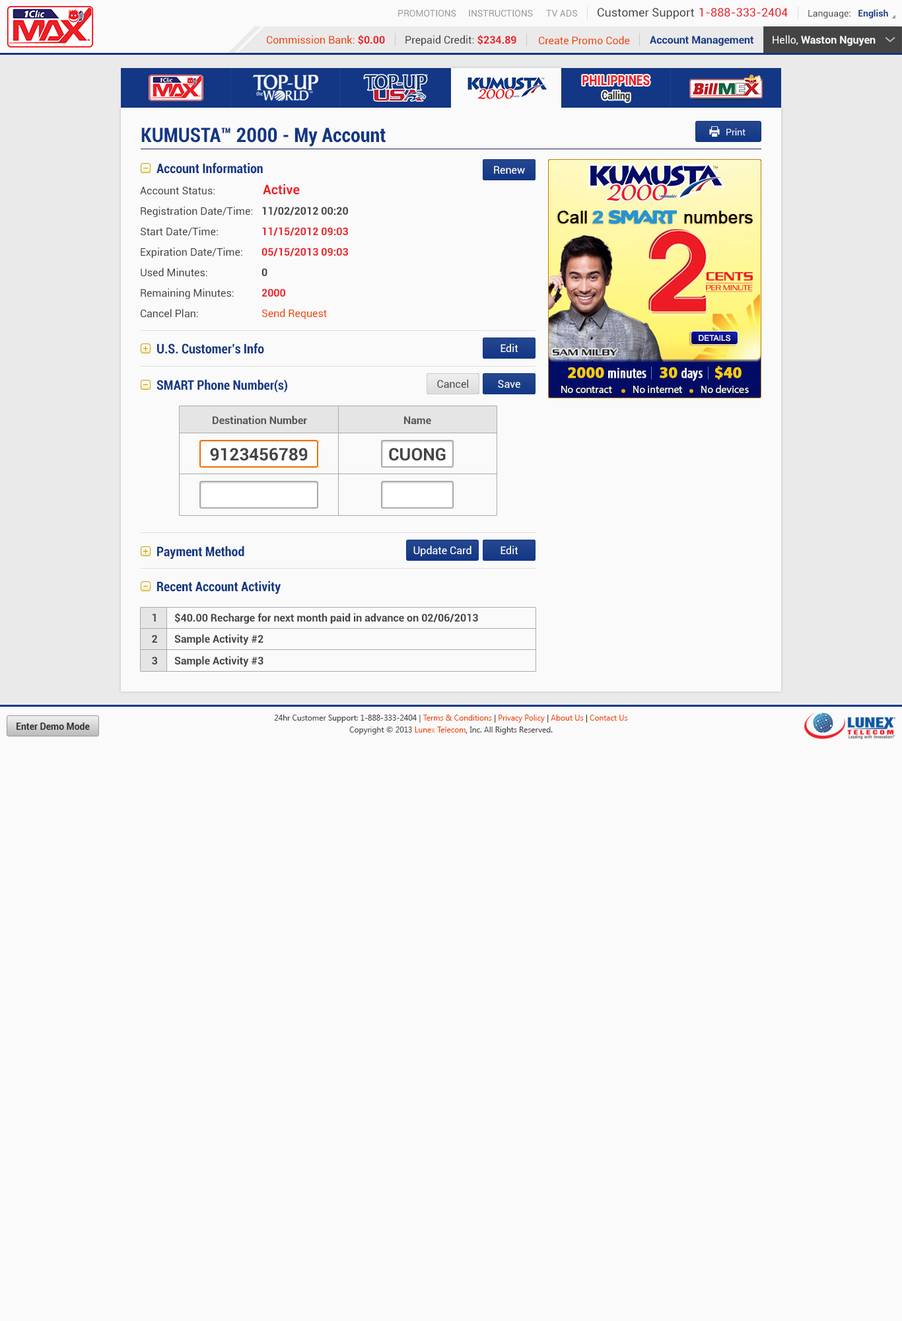
<style>
.page{position:relative;width:902px;height:1321px;background:#fafafa}
.page>*{position:absolute;margin:0}
.t1{font:9.2px "Roboto-Regular";color:#999999}
.t2{font:11.6px "Roboto-Regular";color:#444444}
.t3{font:11.6px "Roboto-Regular";color:#ec2029}
.t4{font:9.2px "Roboto-Regular";color:#444444}
.t5{font:9.2px "Roboto-Bold";color:#123785}
.t6{font:10.6px "Roboto-Regular";color:#ee4400}
.t7{font:10.6px "Roboto-Bold";color:#ec2028}
.t8{font:10.6px "Roboto-Regular";color:#444444}
.t9{font:10.6px "Roboto-Bold";color:#123785}
.t10{font:10.6px "Roboto-Bold";color:#fafafa}
.t11{font:10.6px "Roboto-Regular";color:#fafafa}
.t12{font:14.1px "Roboto-Black";color:#ec2028;scale:0.81 1}
.t13{font:11.3px "Roboto-Black";color:#333333;scale:0.81 1}
.t14{font:19.8px "Roboto-BoldCondensed";color:#123785}
.t15{font:9.2px "Roboto-Regular";color:#fafafa}
.t16{font:13.2px "Roboto-BoldCondensed";color:#123785}
.t17{font:10.6px "Roboto-Regular";color:#ffffff}
.t18{font:13.2px "Roboto-Bold";color:#ec222a}
.t19{font:10.6px "Roboto-Bold";color:#444444}
.t20{font:10.6px "Roboto-Bold";color:#ec222a}
.t21{font:10.6px "Roboto-Bold";color:#555555}
.t22{font:17.2px "Roboto-Bold";color:#444444}
.t23{font:9.2px "Roboto-Bold";color:#333333}
.t24{font:7.9px/11.9px "SegoeUI";color:#444444}
.t25{font:7.9px/11.9px "SegoeUI";color:#ee4400}
.t26{font:7.9px/11.9px "SegoeUI";color:#333333}
</style>
<div class="page">
<p class="t1" style="left:398px;top:10px;width:59px;height:7px">PROMOTIONS</p>
<p class="t1" style="left:469px;top:10px;width:64px;height:7px">INSTRUCTIONS</p>
<p class="t1" style="left:546px;top:10px;width:31px;height:7px">TV ADS</p>
<p class="t2" style="left:598px;top:8px;width:96px;height:11px">Customer Support</p>
<p class="t3" style="left:700px;top:8px;width:88px;height:9px">1-888-333-2404</p>
<p class="t4" style="left:809px;top:9px;width:80px;height:9px">Language:   <span class="t5">English</span></p>
<p class="t6" style="left:267px;top:35px;width:118px;height:10px">Commission Bank: <span class="t7">$0.00</span></p>
<p class="t8" style="left:406px;top:35px;width:111px;height:11px">Prepaid Credit: <span class="t7">$234.89</span></p>
<p class="t6" style="left:539px;top:36px;width:91px;height:9px">Create Promo Code</p>
<p class="t9" style="left:650px;top:36px;width:104px;height:10px">Account Management</p>
<p class="t10" style="left:773px;top:35px;width:103px;height:11px"><span class="t11">Hello, </span>Waston Nguyen</p>
<p class="t12" style="left:583px;top:75px;width:67px;height:11px">PHILIPPINES</p>
<p class="t13" style="left:603px;top:91px;width:27px;height:11px">Calling</p>
<p class="t14" style="left:141px;top:128px;width:245px;height:19px">KUMUSTA™ 2000 - My Account</p>
<p class="t15" style="left:727px;top:128px;width:19px;height:7px">Print</p>
<p class="t16" style="left:157px;top:163px;width:106px;height:11px">Account Information</p>
<p class="t17" style="left:494px;top:166px;width:31px;height:8px">Renew</p>
<p class="t18" style="left:263px;top:184px;width:37px;height:11px">Active</p>
<p class="t8" style="left:140px;top:186px;width:75px;height:9px">Account Status:</p>
<p class="t8" style="left:141px;top:206px;width:111px;height:11px">Registration Date/Time:</p>
<p class="t19" style="left:262px;top:207px;width:86px;height:8px">11/02/2012 00:20</p>
<p class="t8" style="left:141px;top:227px;width:77px;height:10px">Start Date/Time:</p>
<p class="t20" style="left:262px;top:227px;width:86px;height:9px">11/15/2012 09:03</p>
<p class="t8" style="left:141px;top:247px;width:101px;height:11px">Expiration Date/Time:</p>
<p class="t20" style="left:262px;top:248px;width:86px;height:8px">05/15/2013 09:03</p>
<p class="t8" style="left:141px;top:268px;width:66px;height:9px">Used Minutes:</p>
<p class="t19" style="left:262px;top:268px;width:6px;height:8px">0</p>
<p class="t8" style="left:141px;top:288px;width:93px;height:11px">Remaining Minutes:</p>
<p class="t20" style="left:262px;top:289px;width:23px;height:8px">2000</p>
<p class="t8" style="left:141px;top:309px;width:57px;height:9px">Cancel Plan:</p>
<p class="t6" style="left:262px;top:309px;width:65px;height:11px">Send Request</p>
<p class="t16" style="left:157px;top:343px;width:107px;height:11px">U.S. Customer’s Info</p>
<p class="t17" style="left:501px;top:344px;width:18px;height:8px">Edit</p>
<p class="t16" style="left:157px;top:379px;width:130px;height:13px">SMART Phone Number(s)</p>
<p class="t8" style="left:437px;top:379px;width:31px;height:9px">Cancel</p>
<p class="t17" style="left:498px;top:380px;width:23px;height:8px">Save</p>
<p class="t21" style="left:213px;top:416px;width:94px;height:9px">Destination Number</p>
<p class="t21" style="left:404px;top:416px;width:27px;height:9px">Name</p>
<p class="t22" style="left:210px;top:448px;width:98px;height:13px">9123456789</p>
<p class="t22" style="left:389px;top:448px;width:57px;height:13px">CUONG</p>
<p class="t16" style="left:157px;top:546px;width:87px;height:14px">Payment Method</p>
<p class="t17" style="left:414px;top:546px;width:58px;height:11px">Update Card</p>
<p class="t17" style="left:501px;top:546px;width:18px;height:8px">Edit</p>
<p class="t16" style="left:157px;top:581px;width:124px;height:14px">Recent Account Activity</p>
<p class="t19" style="left:153px;top:614px;width:3px;height:8px">1</p>
<p class="t19" style="left:174px;top:613px;width:304px;height:11px">$40.00 Recharge for next month paid in advance on 02/06/2013</p>
<p class="t19" style="left:152px;top:635px;width:5px;height:8px">2</p>
<p class="t19" style="left:174px;top:634px;width:90px;height:11px">Sample Activity #2</p>
<p class="t19" style="left:152px;top:657px;width:5px;height:8px">3</p>
<p class="t19" style="left:174px;top:656px;width:90px;height:11px">Sample Activity #3</p>
<p class="t23" style="left:17px;top:723px;width:73px;height:7px">Enter Demo Mode</p>
<p class="t24" style="left:274px;top:715px;width:354px;height:20px;text-align:center">24hr Customer Support: 1-888-333-2404 | <span class="t25">Terms &amp; Conditions</span><span class="t26"> | </span><span class="t25">Privacy Policy</span><span class="t26"> | </span><span class="t25">About Us</span><span class="t26"> | </span><span class="t25">Contact Us<br></span>Copyright © 2013 <span class="t25">Lunex Telecom</span><span class="t26">,</span> Inc. All Rights Reserved.</p>
</div>
